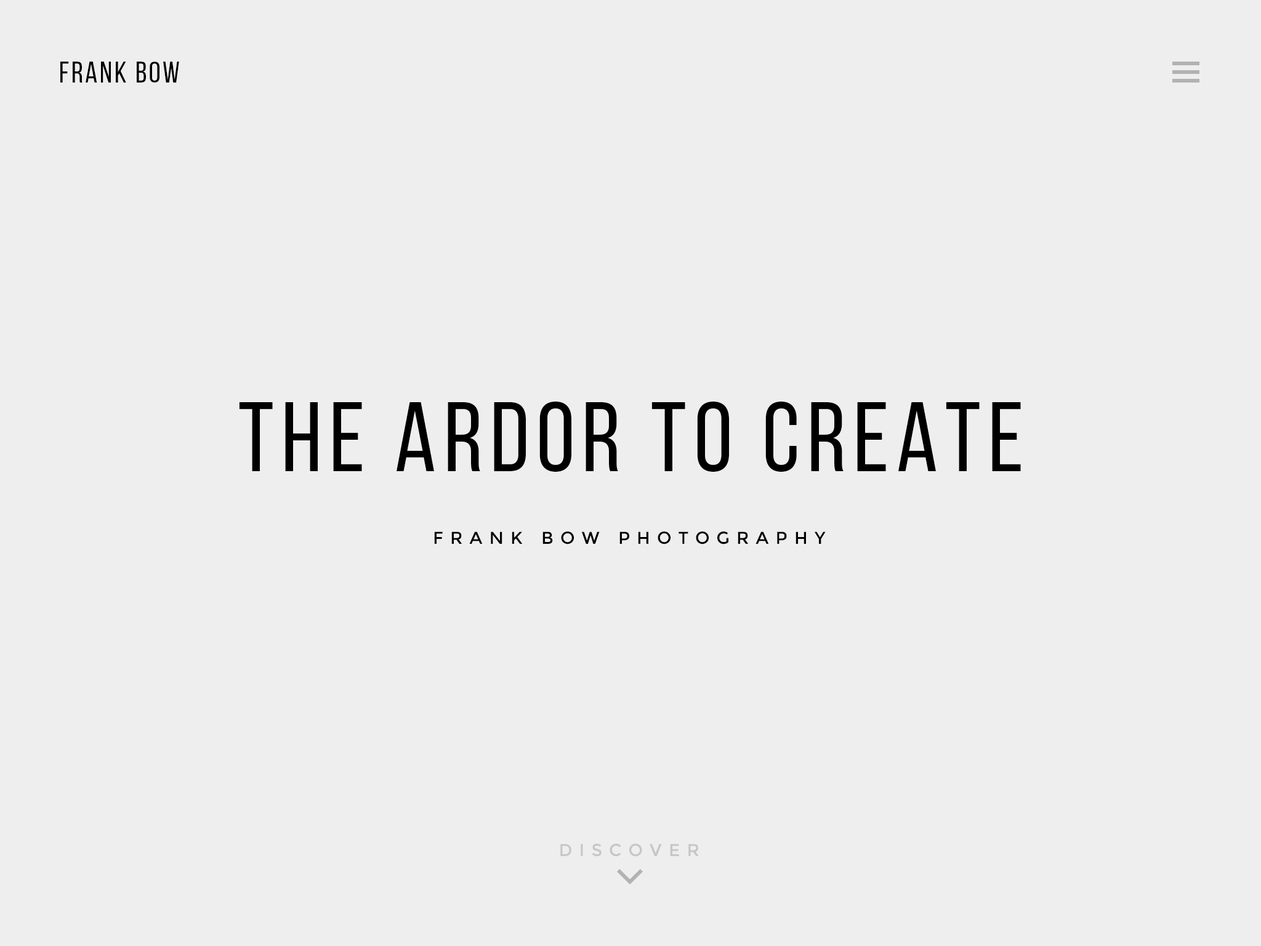
<style>
.page{position:relative;width:1261px;height:946px;background:#eeeeee}
.page>*{position:absolute;margin:0}
.t1{font:29.6px "BebasNeueRegular";letter-spacing:0.075em;color:#000000;text-transform:uppercase}
.t2{font:98.5px "BebasNeueRegular";letter-spacing:0.075em;color:#000000}
.t3{font:17.2px "Montserrat-Regular";letter-spacing:0.4em;color:#000000;text-transform:uppercase}
.t4{font:17.2px "Montserrat-Regular";letter-spacing:0.4em;color:#c6c6c6;text-transform:uppercase}
</style>
<div class="page">
<p class="t1" style="left:60px;top:62px;width:119px;height:21px">FRANK BOW</p>
<p class="t2" style="left:239px;top:401px;width:782px;height:71px">THE ARDOR TO CREATE</p>
<p class="t3" style="left:434px;top:531px;width:392px;height:13px">FRANK BOW PHOTOGRAPHY</p>
<p class="t4" style="left:560px;top:843px;width:139px;height:13px">DISCOVER</p>
</div>
